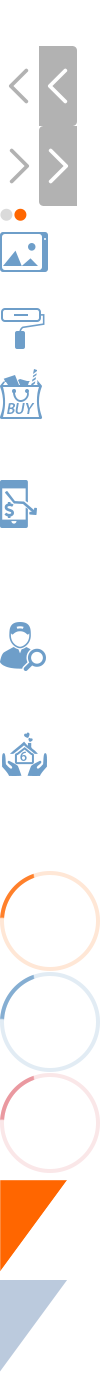
<style>
.page{position:relative;width:100px;height:1400px;background:#ffffff}
.page>*{position:absolute;margin:0}
.t1{font:14px "AdobeHeitiStd-Regular";color:#6e9ec9;font-style:italic}
</style>
<div class="page">
<p class="t1" style="left:7px;top:403px;width:28px;height:11px">BUY</p>
</div>
